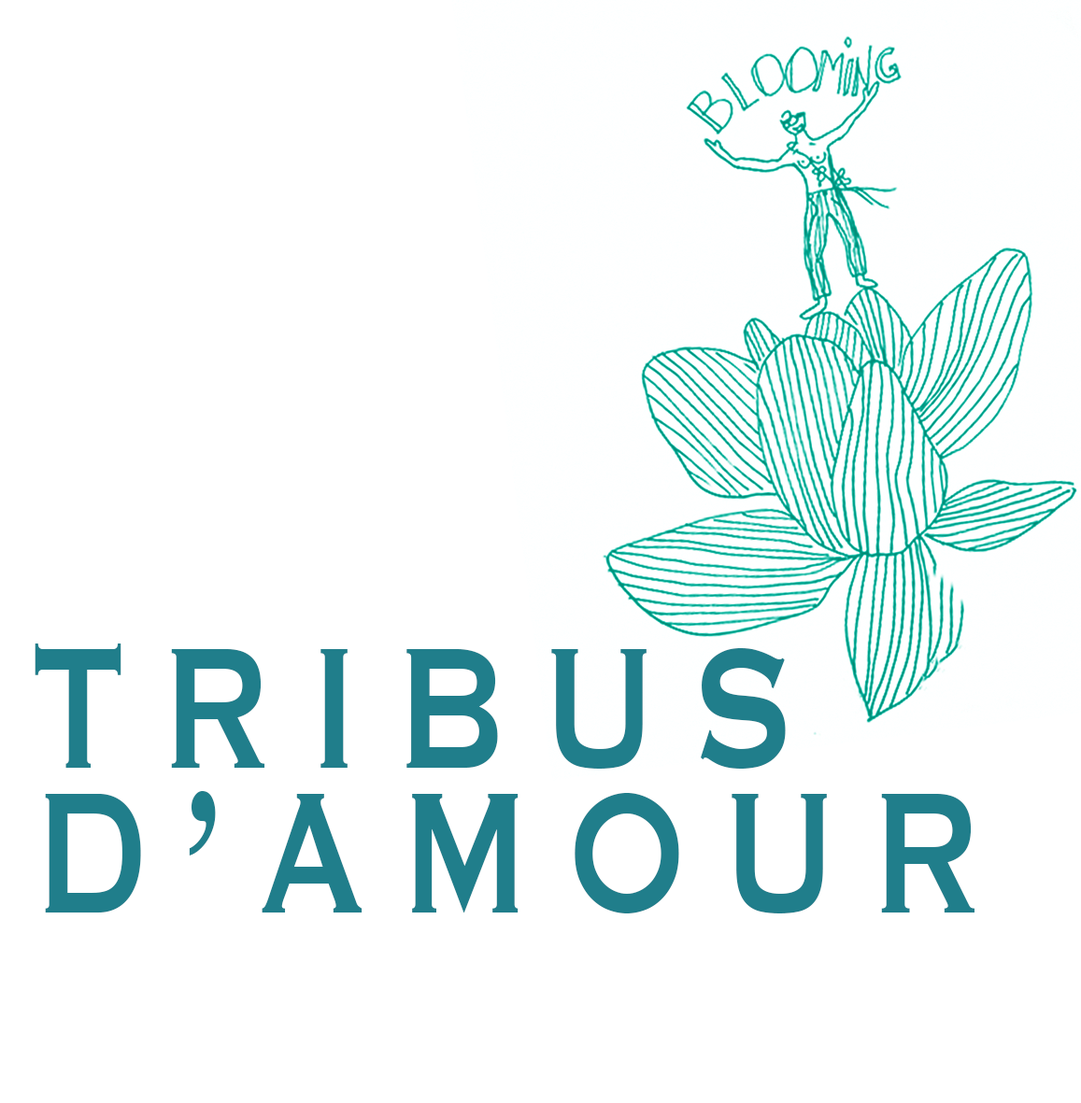
<style>
.page{position:relative;width:1081px;height:1103px;background:#ffffff}
.page>*{position:absolute;margin:0}
.t1{font:224.9px "Copperplate";letter-spacing:0.2em;color:#207e8b;scale:0.71 1}
</style>
<div class="page">
<p class="t1" style="left:35px;top:644px;width:751px;height:125px">TRIBUS</p>
<p class="t1" style="left:45px;top:791px;width:929px;height:123px">D’AMOUR</p>
</div>
